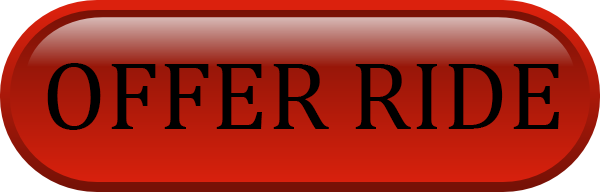
<style>
.page{position:relative;width:600px;height:192px}
.page>*{position:absolute;margin:0}
.t1{font:98.1px "Cambria";color:#000000}
</style>
<div class="page">
<p class="t1" style="left:47px;top:63px;width:512px;height:67px">OFFER RIDE</p>
</div>
